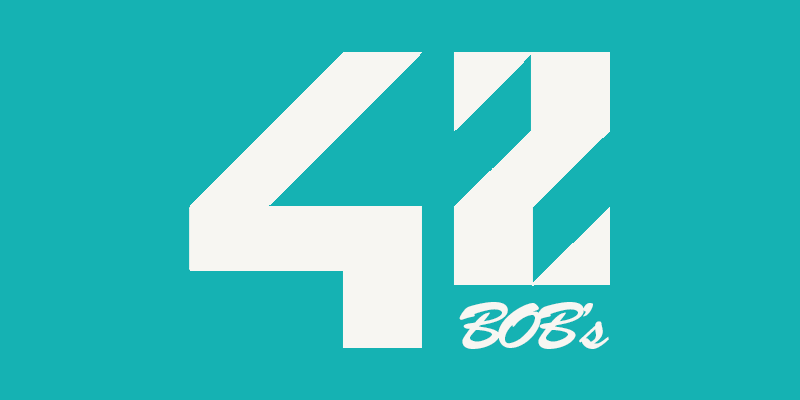
<style>
.page{position:relative;width:800px;height:400px;background:#15b2b3}
.page>*{position:absolute;margin:0}
.t1{font:65.8px "BrushScriptStd";letter-spacing:-0.1em;color:#f7f6f2}
</style>
<div class="page">
<p class="t1" style="left:459px;top:302px;width:150px;height:47px">BOB’s</p>
</div>
